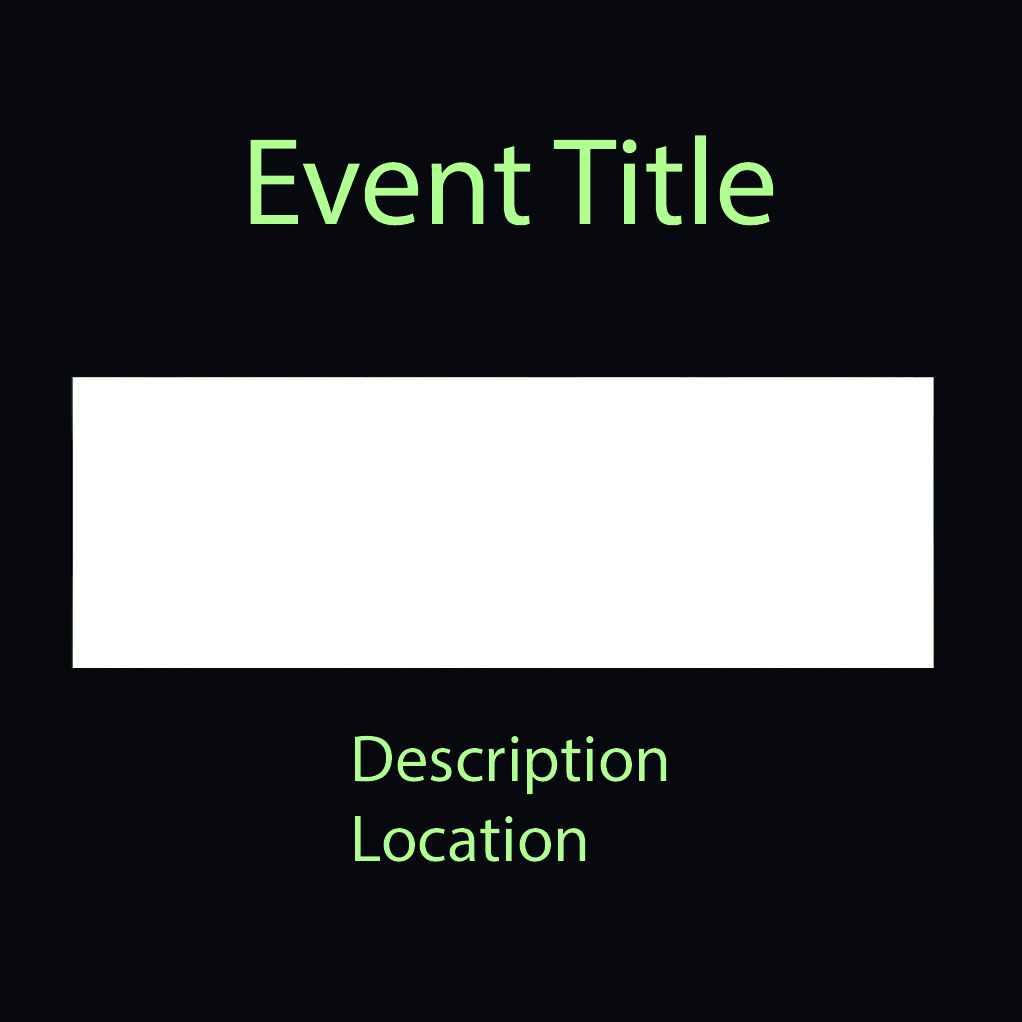
<style>
.page{position:relative;width:1022px;height:1022px;background:#08090e}
.page>*{position:absolute;margin:0}
.t1{font:125px "MyriadHebrew-Regular";color:#b0ff91}
.t2{font:66.7px "MyriadHebrew-Regular";color:#b0ff91}
</style>
<div class="page">
<p class="t1" style="left:250px;top:135px;width:524px;height:91px">Event Title</p>
<p class="t2" style="left:355px;top:735px;width:312px;height:127px">Description<br>Location</p>
</div>
